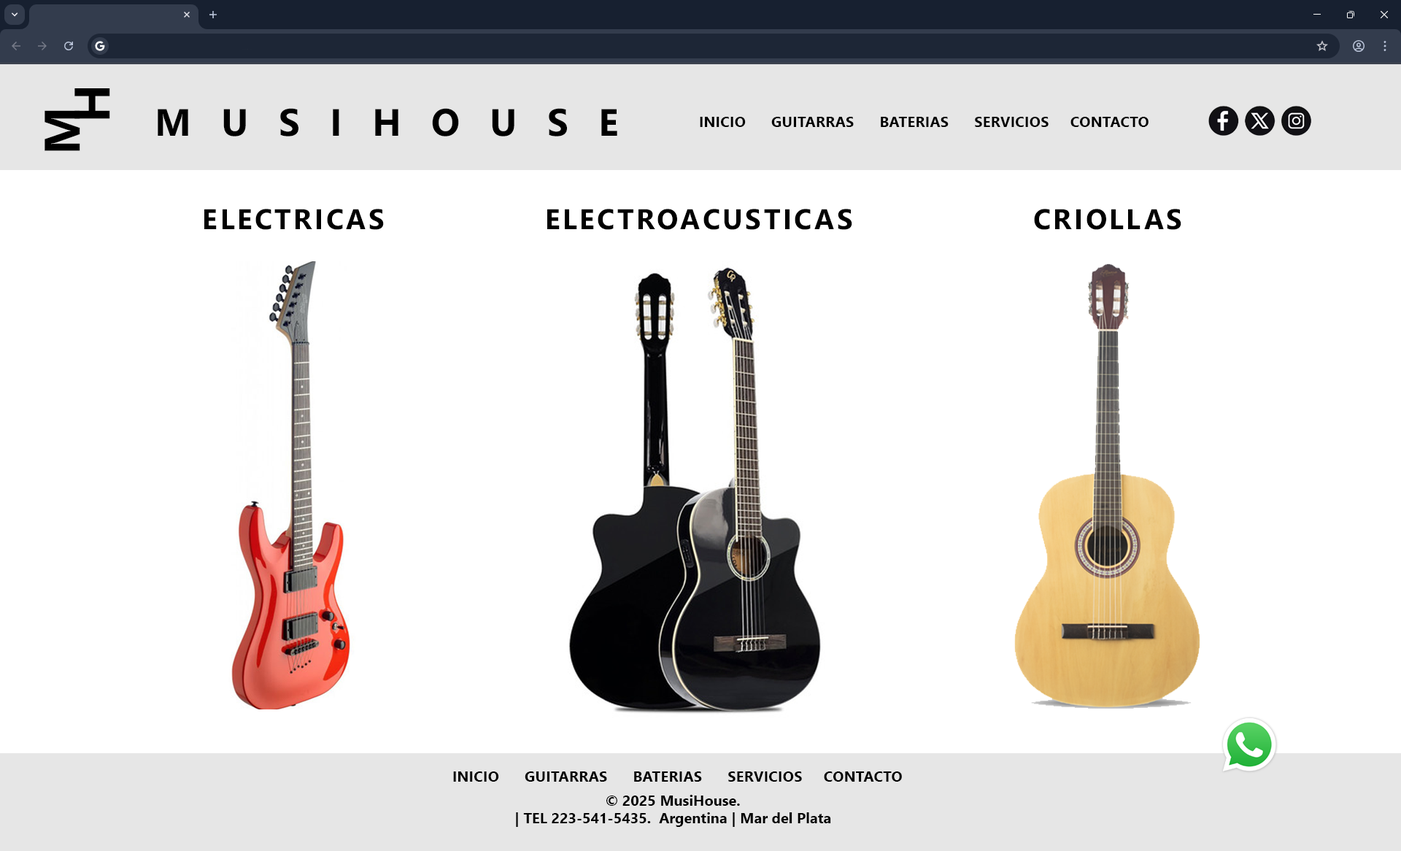
<style>
.page{position:relative;width:1401px;height:851px;background:#ffffff}
.page>*{position:absolute;margin:0}
.t1{font:49.9px/30px "SegoeUI-Bold";letter-spacing:0.8em;color:#000000}
.t2{font:37.9px "SegoeUI-Bold";letter-spacing:0.8em;color:#000000}
.t3{font:14.6px "SegoeUI-Bold";letter-spacing:0.015em;color:#000000}
.t4{font:28.2px "SegoeUI-Bold";letter-spacing:0.09em;color:#000000}
.t5{font:14.6px "SegoeUI-Bold";color:#000000}
</style>
<div class="page">
<p class="t1" style="left:45px;top:88px;width:65px;height:63px;text-align:center;rotate:-90deg">M<br> H</p>
<p class="t2" style="left:158px;top:108px;width:459px;height:28px">MUSIHOUSE</p>
<p class="t3" style="left:700px;top:117px;width:449px;height:10px">INICIO      GUITARRAS      BATERIAS      SERVICIOS     CONTACTO</p>
<p class="t4" style="left:204px;top:209px;width:180px;height:21px">ELECTRICAS</p>
<p class="t4" style="left:547px;top:209px;width:305px;height:21px">ELECTROACUSTICAS</p>
<p class="t4" style="left:1034px;top:209px;width:148px;height:21px">CRIOLLAS</p>
<p class="t3" style="left:453px;top:771px;width:449px;height:11px">INICIO      GUITARRAS      BATERIAS      SERVICIOS     CONTACTO</p>
<p class="t5" style="left:516px;top:795px;width:315px;height:32px;text-align:center">© 2025 MusiHouse.<br>| TEL 223-541-5435.  Argentina | Mar del Plata</p>
</div>
